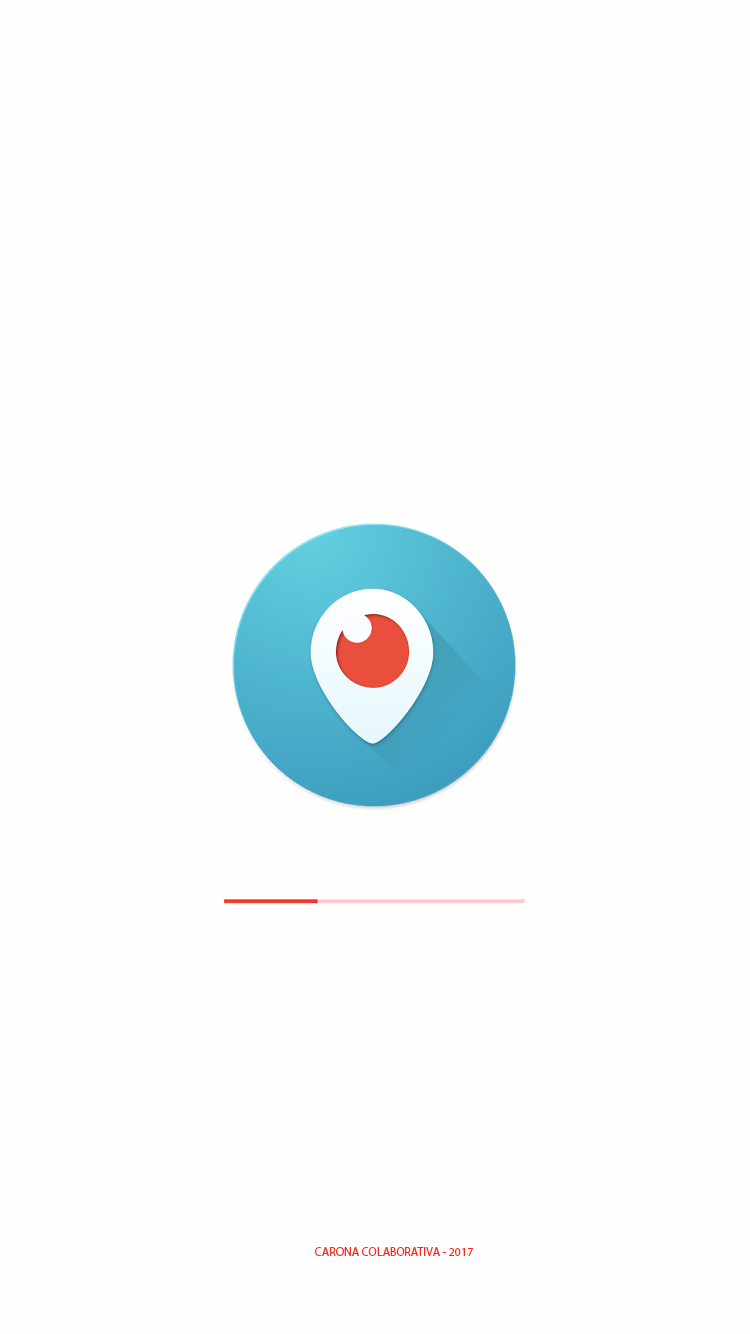
<style>
.page{position:relative;width:750px;height:1334px;background:#fffefe}
.page>*{position:absolute;margin:0}
.t1{font:12px "MyriadPro-Regular";color:#f32c1d}
</style>
<div class="page">
<p class="t1" style="left:315px;top:1247px;width:158px;height:9px">CARONA COLABORATIVA - 2017</p>
</div>
